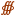
<style>
.page{position:relative;width:16px;height:16px;background:#ffffff}
.page>*{position:absolute;margin:0}
.t1{font:12px "STIXGeneral-Regular";color:#993300}
</style>
<div class="page">
<p class="t1" style="left:1px;top:1px;width:14px;height:14px">∰</p>
</div>
